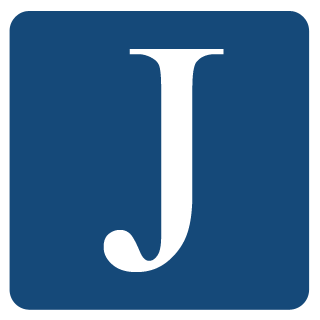
<style>
.page{position:relative;width:320px;height:320px;background:#154979}
.page>*{position:absolute;margin:0}
.t1{font:330px "TimesNewRomanPSMT";color:#ffffff}
</style>
<div class="page">
<p class="t1" style="left:103px;top:49px;width:121px;height:223px">J</p>
</div>
